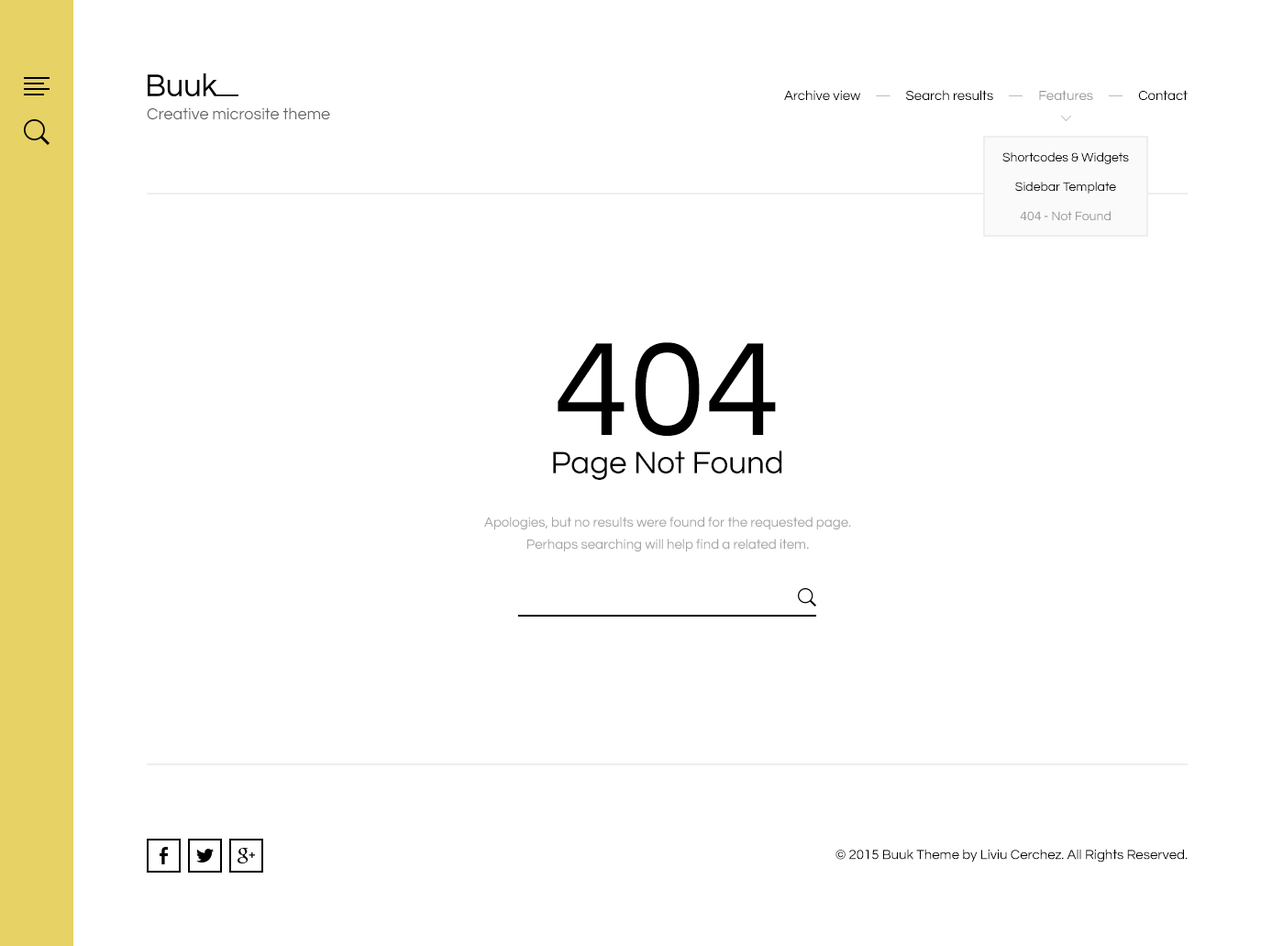
<style>
.page{position:relative;width:1261px;height:946px;background:#ffffff}
.page>*{position:absolute;margin:0}
.t1{font:13.8px "Questrial-Regular";color:#000000}
.t2{font:13.8px "Questrial-Regular";color:#bbbbbb}
.t3{font:13.8px "Questrial-Regular";color:#999999}
.t4{font:16.5px "Questrial-Regular";color:#676767}
.t5{font:12.8px/29.3px "Questrial-Regular";color:#000000}
.t6{font:12.8px/29.3px "Questrial-Regular";color:#999999}
.t7{font:32.1px "Questrial-Regular";color:#000000}
.t8{font:137.6px "Questrial-Regular";color:#000000}
.t9{font:13.8px/22px "Questrial-Regular";color:#a3a3a3}
</style>
<div class="page">
<p class="t1" style="left:784px;top:90px;width:404px;height:10px">Archive view     <span class="t2">—</span>     Search results     <span class="t2">—     </span><span class="t3">Features     </span><span class="t2">—</span>     Contact</p>
<p class="t4" style="left:147px;top:107px;width:183px;height:13px">Creative microsite theme</p>
<p class="t5" style="left:1002px;top:152px;width:127px;height:68px;text-align:center">Shortcodes &amp; Widgets<br>Sidebar Template<br><span class="t6">404 - Not Found</span></p>
<p class="t7" style="left:553px;top:342px;width:229px;height:138px;text-align:center"><span class="t8">404<br></span>Page Not Found</p>
<p class="t9" style="left:484px;top:516px;width:367px;height:35px;text-align:center">Apologies, but no results were found for the requested page.<br>Perhaps searching will help find a related item.</p>
<p class="t1" style="left:836px;top:848px;width:352px;height:14px">© 2015 Buuk Theme by Liviu Cerchez. All Rights Reserved.</p>
</div>
